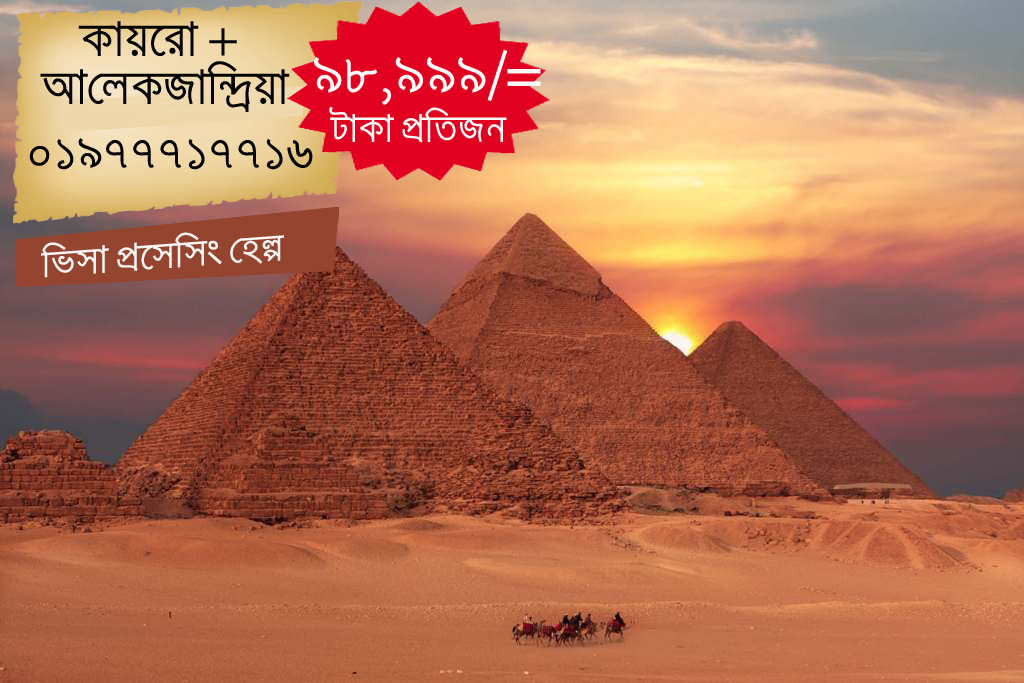
<style>
.page{position:relative;width:1024px;height:683px}
.page>*{position:absolute;margin:0}
.t1{font:40px "SiyamRupaliANSI";color:#050300}
.t2{font:48px "SiyamRupaliANSI";color:#fcfaf8}
.t3{font:32px "SiyamRupaliANSI";color:#fcfaf8}
.t4{font:32px "SiyamRupaliANSI";color:#faf5f3}
</style>
<div class="page">
<p class="t1" style="left:40px;top:21px;width:250px;height:91px;text-align:center">Kvq‡iv + <br>Av†jKRvw›`ªqv</p>
<p class="t2" style="left:314px;top:49px;width:227px;height:56px">98,999/=</p>
<p class="t3" style="left:329px;top:106px;width:178px;height:37px">UvKv cÖwZRb</p>
<p class="t1" style="left:29px;top:138px;width:284px;height:32px">01977717716</p>
<p class="t4" style="left:41px;top:232px;width:243px;height:46px;rotate:-4deg">wfmv cÖ‡mwms †ní</p>
</div>
